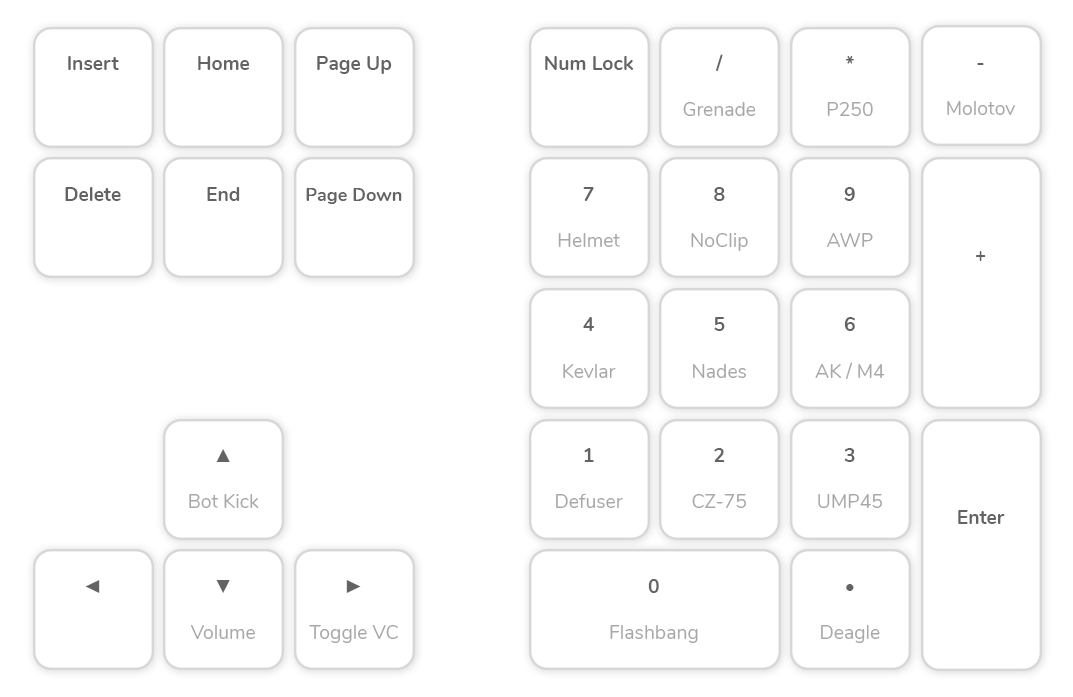
<style>
.page{position:relative;width:1073px;height:697px;background:#ffffff}
.page>*{position:absolute;margin:0}
.t1{font:19.4px "Nunito-Regular";color:#a8a8a8}
.t2{font:19.4px "Nunito-Bold";color:#636363}
.t3{font:18.2px "Nunito-Bold";color:#636363}
.t4{font:19.4px "TimesNewRomanPSMT";color:#636363}
.t5{font:19.4px "Nunito-Regular";color:#636363}
</style>
<div class="page">
<p class="t1" style="left:683px;top:54px;width:73px;height:62px;text-align:center"><span class="t2">/<br><br></span>Grenade</p>
<p class="t2" style="left:68px;top:56px;width:51px;height:14px">Insert</p>
<p class="t2" style="left:198px;top:56px;width:52px;height:14px">Home</p>
<p class="t2" style="left:317px;top:56px;width:75px;height:18px">Page Up</p>
<p class="t2" style="left:545px;top:56px;width:89px;height:14px">Num Lock</p>
<p class="t1" style="left:827px;top:56px;width:46px;height:60px;text-align:center"><span class="t2">*<br><br></span>P250</p>
<p class="t1" style="left:947px;top:63px;width:68px;height:52px;text-align:center"><span class="t2">-<br><br></span>Molotov</p>
<p class="t2" style="left:65px;top:187px;width:56px;height:14px">Delete</p>
<p class="t2" style="left:207px;top:187px;width:33px;height:14px">End</p>
<p class="t3" style="left:306px;top:188px;width:96px;height:16px">Page Down</p>
<p class="t1" style="left:558px;top:187px;width:62px;height:60px;text-align:center"><span class="t2">7<br><br></span>Helmet</p>
<p class="t1" style="left:691px;top:187px;width:57px;height:64px;text-align:center"><span class="t2">8<br><br></span>NoClip</p>
<p class="t1" style="left:827px;top:187px;width:46px;height:60px;text-align:center"><span class="t2">9<br><br></span>AWP</p>
<p class="t2" style="left:975px;top:251px;width:11px;height:10px">+</p>
<p class="t1" style="left:563px;top:317px;width:53px;height:61px;text-align:center"><span class="t2">4<br><br></span>Kevlar</p>
<p class="t1" style="left:693px;top:317px;width:53px;height:61px;text-align:center"><span class="t2">5<br><br></span>Nades</p>
<p class="t1" style="left:815px;top:317px;width:70px;height:62px;text-align:center"><span class="t2">6<br><br></span>AK / M4</p>
<p class="t1" style="left:189px;top:449px;width:70px;height:59px;text-align:center"><span class="t4">▲<br><br></span>Bot Kick</p>
<p class="t1" style="left:556px;top:448px;width:67px;height:60px;text-align:center"><span class="t2">1<br><br></span>Defuser</p>
<p class="t1" style="left:692px;top:448px;width:54px;height:60px;text-align:center"><span class="t2">2<br><br></span>CZ-75</p>
<p class="t1" style="left:818px;top:448px;width:64px;height:60px;text-align:center"><span class="t2">3<br><br></span>UMP45</p>
<p class="t2" style="left:958px;top:510px;width:47px;height:14px">Enter</p>
<p class="t4" style="left:85px;top:580px;width:15px;height:13px">◄</p>
<p class="t1" style="left:191px;top:580px;width:64px;height:59px;text-align:center"><span class="t4">▼<br><br></span>Volume</p>
<p class="t1" style="left:309px;top:580px;width:89px;height:63px;text-align:center"><span class="t4">►<br><br></span>Toggle VC</p>
<p class="t1" style="left:610px;top:579px;width:88px;height:64px;text-align:center"><span class="t2">0<br><br></span>Flashbang</p>
<p class="t1" style="left:821px;top:584px;width:59px;height:59px;text-align:center"><span class="t5">•<br><br></span>Deagle</p>
</div>
